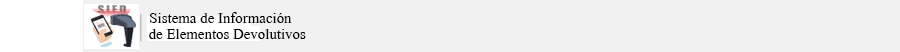
<style>
.page{position:relative;width:900px;height:52px;background:#f1f1f1}
.page>*{position:absolute;margin:0}
.t1{font:18px "ShonarBangla";color:#000000}
</style>
<div class="page">
<p class="t1" style="left:150px;top:12px;width:142px;height:11px">Sistema de Información</p>
<p class="t1" style="left:149px;top:29px;width:157px;height:10px">de Elementos Devolutivos</p>
</div>
